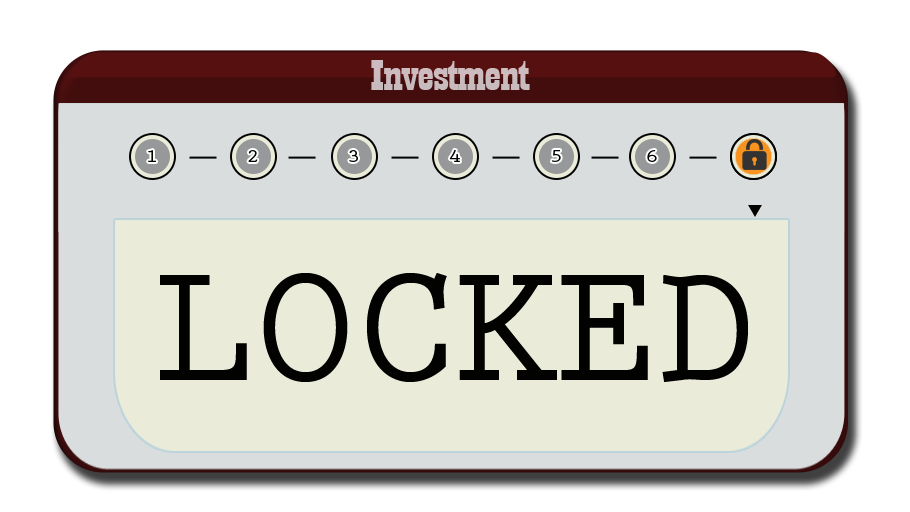
<style>
.page{position:relative;width:910px;height:512px;background:#eaebd8}
.page>*{position:absolute;margin:0}
.t1{font:44.6px "Playbill";letter-spacing:-0.025em;color:#c8bbbe;scale:1.61 1}
.t2{font:18.8px "PrestigeEliteStd-Bd";letter-spacing:-0.025em;color:#020201;scale:1.18 1}
.t3{font:175px "PrestigeEliteStd-Bd";letter-spacing:-0.025em;color:#020201}
</style>
<div class="page">
<p class="t1" style="left:371px;top:60px;width:159px;height:30px">Investment</p>
<p class="t2" style="left:148px;top:150px;width:8px;height:12px">1</p>
<p class="t2" style="left:248px;top:150px;width:10px;height:12px">2</p>
<p class="t2" style="left:349px;top:150px;width:9px;height:12px">3</p>
<p class="t2" style="left:449px;top:149px;width:11px;height:13px">4</p>
<p class="t2" style="left:551px;top:150px;width:10px;height:12px">5</p>
<p class="t2" style="left:647px;top:150px;width:10px;height:12px">6</p>
<p class="t3" style="left:160px;top:273px;width:588px;height:109px">LOCKED</p>
</div>
